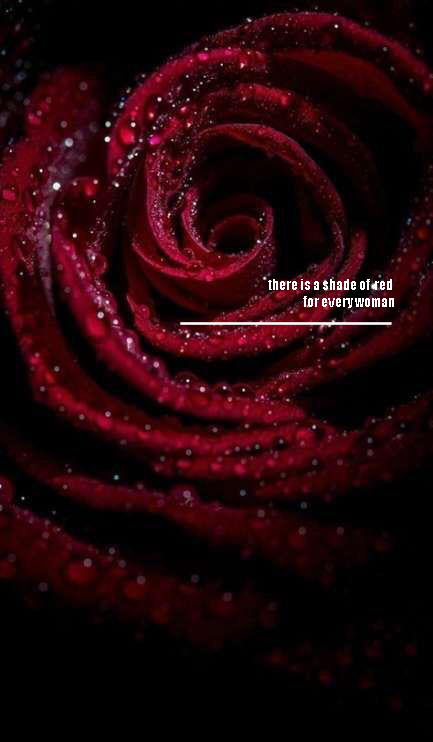
<style>
.page{position:relative;width:433px;height:742px;background:#000000}
.page>*{position:absolute;margin:0}
.t1{font:14px "Impact";color:#ffffff}
</style>
<div class="page">
<p class="t1" style="left:268px;top:279px;width:126px;height:29px;text-align:right">there is a shade of  red <br>for every woman</p>
</div>
